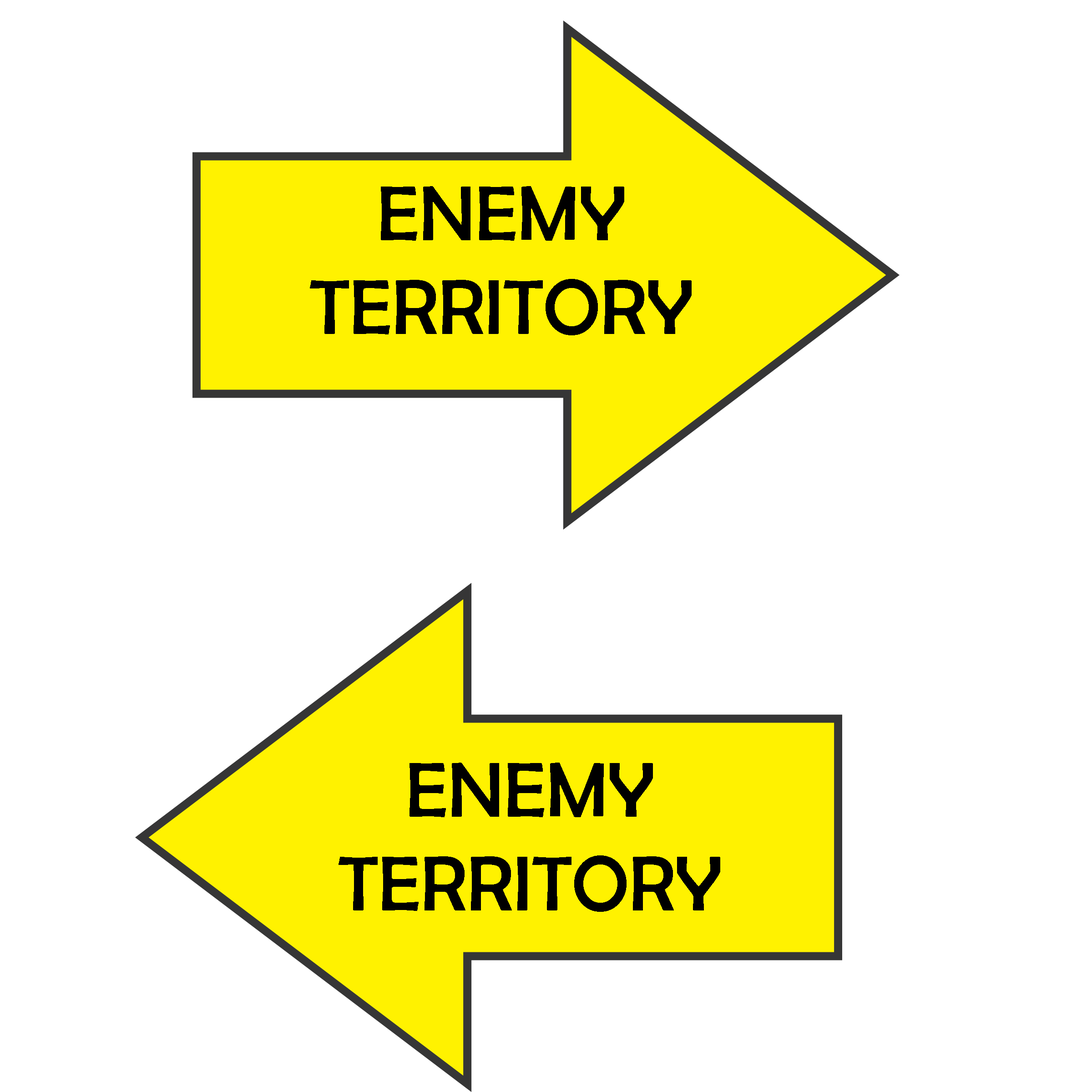
<style>
.page{position:relative;width:1092px;height:1092px;background:#ffffff}
.page>*{position:absolute;margin:0}
.t1{font:78.3px "BerlinSansFB-Reg";color:#000000}
</style>
<div class="page">
<p class="t1" style="left:310px;top:186px;width:382px;height:149px;text-align:center">ENEMY<br>TERRITORY</p>
<p class="t1" style="left:339px;top:763px;width:381px;height:149px;text-align:center">ENEMY<br>TERRITORY</p>
</div>
